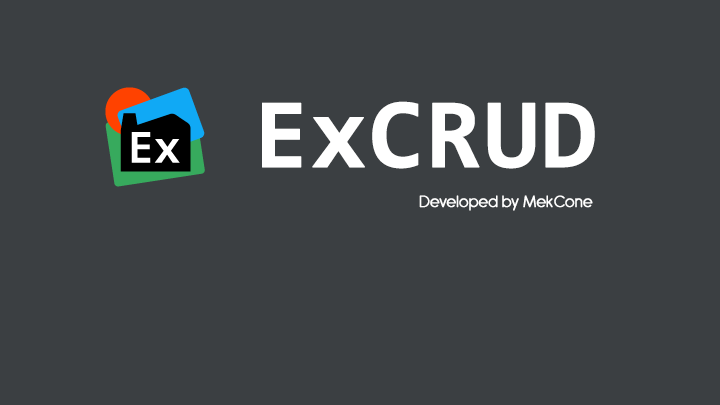
<style>
.page{position:relative;width:720px;height:405px;background:#3b3f42}
.page>*{position:absolute;margin:0}
.t1{font:100px "Consolas-Bold";color:#ffffff;font-weight:bold}
.t2{font:18px "Antipasto";color:#ffffff;font-weight:bold}
</style>
<div class="page">
<p class="t1" style="left:262px;top:101px;width:333px;height:68px">ExCRUD</p>
<p class="t2" style="left:419px;top:195px;width:174px;height:16px">Developed by MekCone</p>
</div>
